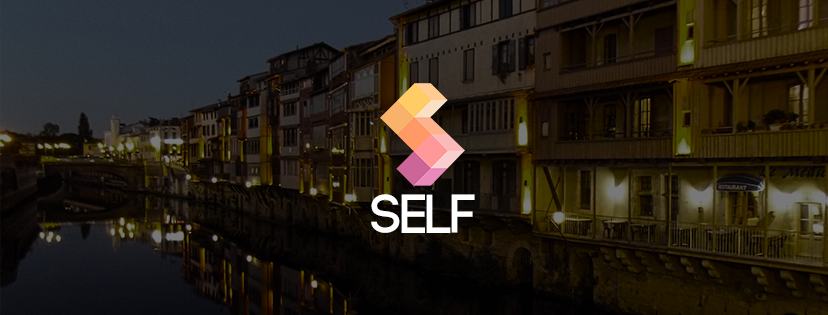
<style>
.page{position:relative;width:828px;height:315px}
.page>*{position:absolute;margin:0}
.t1{font:54.7px "Code-Bold";letter-spacing:-0.01em;color:#ffffff}
</style>
<div class="page">
<p class="t1" style="left:371px;top:194px;width:104px;height:39px">SELF</p>
</div>
